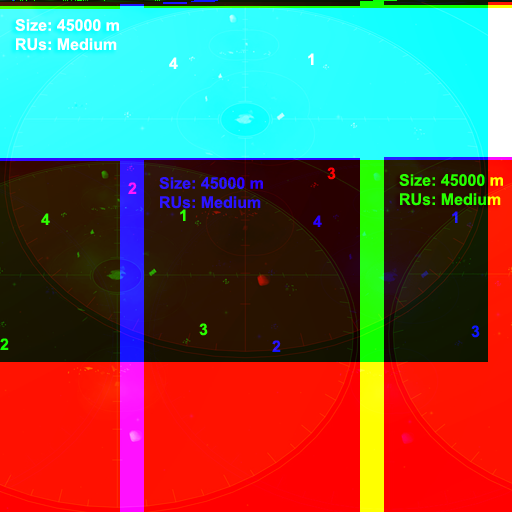
<style>
.page{position:relative;width:512px;height:512px}
.page>*{position:absolute;margin:0}
.t1{font:16px "Arial-BoldMT"}
.t2{font:16px "Arial-BoldMT";color:#ffffff}
</style>
<div class="page">
<p class="t1" style="left:15px;top:17px;width:104px;height:32px">Size: 45000 m<br>RUs: Medium</p>
<p class="t2" style="left:308px;top:51px;width:6px;height:12px">1</p>
<p class="t1" style="left:169px;top:55px;width:9px;height:12px">4</p>
</div>
